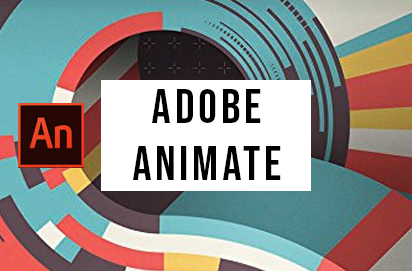
<style>
.page{position:relative;width:412px;height:271px}
.page>*{position:absolute;margin:0}
.t1{font:48px "BebasNeue-Regular";letter-spacing:0.08em;color:#000000}
</style>
<div class="page">
<p class="t1" style="left:133px;top:89px;width:148px;height:91px;text-align:center">ADOBE<br>ANIMATE</p>
</div>
